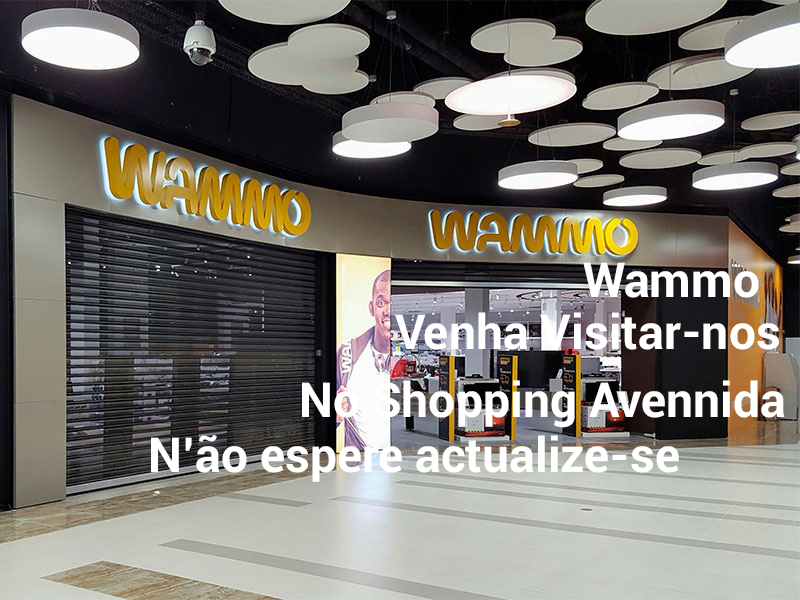
<style>
.page{position:relative;width:800px;height:600px}
.page>*{position:absolute;margin:0}
.t1{font:48px "Roboto-Bold";color:#ffffff}
</style>
<div class="page">
<p class="t1" style="left:583px;top:262px;width:176px;height:36px">Wammo</p>
<p class="t1" style="left:395px;top:312px;width:384px;height:38px">Venha Visitar-nos</p>
<p class="t1" style="left:302px;top:380px;width:483px;height:48px">No Shopping Avennida</p>
<p class="t1" style="left:151px;top:435px;width:528px;height:47px">N’ão espere actualize-se</p>
</div>
